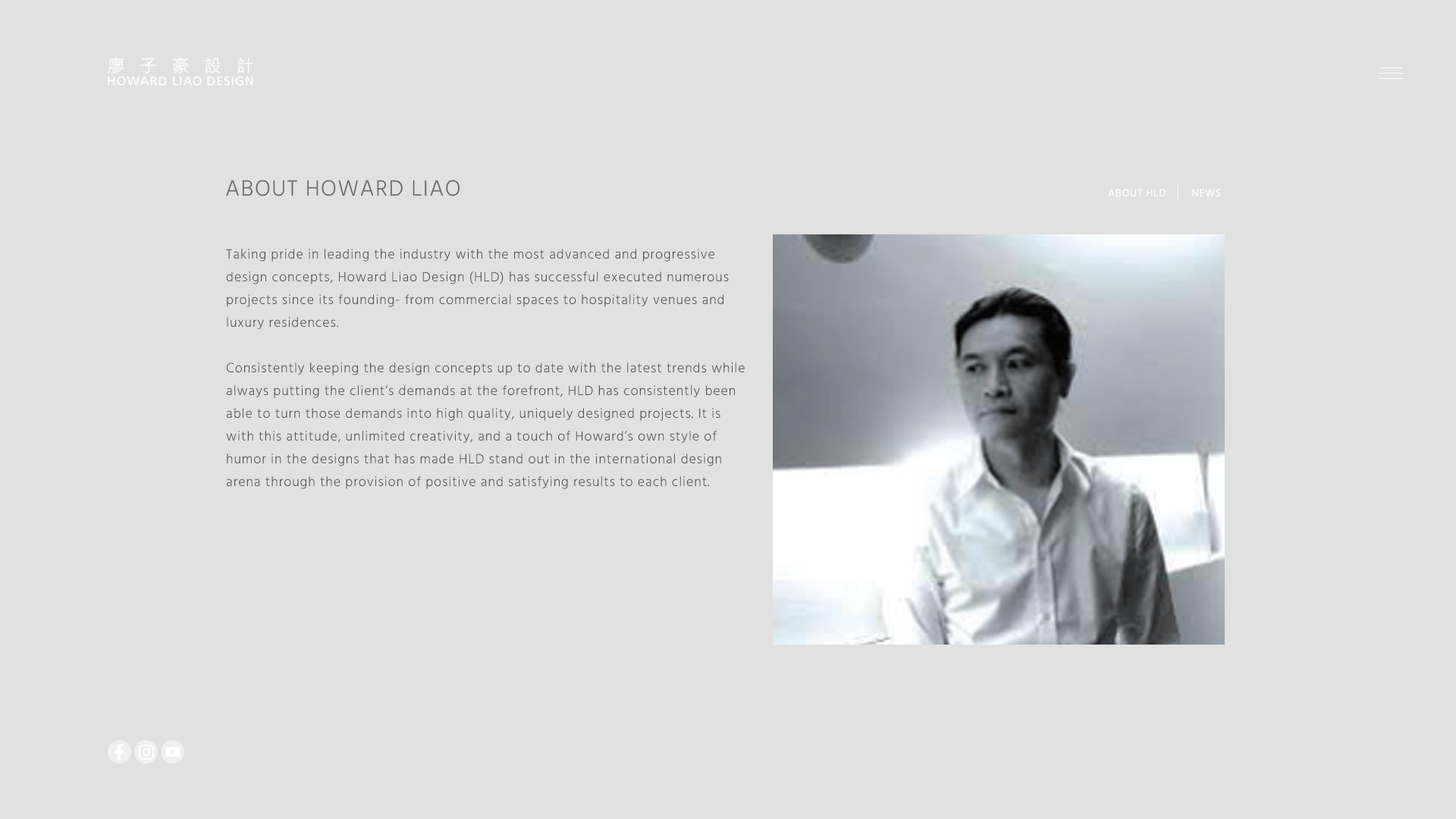
<style>
.page{position:relative;width:1456px;height:819px;background:#e1e1e1}
.page>*{position:absolute;margin:0}
.t1{font:22.7px "Hind-Light";letter-spacing:0.05em;color:#696969}
.t2{font:10.6px "Hind-Regular";letter-spacing:0.05em;color:#ffffff}
.t3{font:13.6px/22.7px "Hind-Light";letter-spacing:0.05em;color:#545454}
</style>
<div class="page">
<p class="t1" style="left:226px;top:180px;width:234px;height:16px">ABOUT HOWARD LIAO</p>
<p class="t2" style="left:1108px;top:189px;width:113px;height:8px">ABOUT HLD        NEWS</p>
<p class="t3" style="left:226px;top:249px;width:519px;height:240px">Taking pride in leading the industry with the most advanced and progressive design concepts, Howard Liao Design (HLD) has successful executed numerous projects since its founding- from commercial spaces to hospitality venues and luxury residences. <br><br>Consistently keeping the design concepts up to date with the latest trends while always putting the client’s demands at the forefront, HLD has consistently been able to turn those demands into high quality, uniquely designed projects. It is with this attitude, unlimited creativity, and a touch of Howard’s own style of humor in the designs that has made HLD stand out in the international design arena through the provision of positive and satisfying results to each client.</p>
</div>
